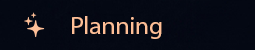
<style>
.page{position:relative;width:255px;height:50px;background:#040813}
.page>*{position:absolute;margin:0}
.t1{font:25px "MyriadPro-Regular";color:#febf97}
</style>
<div class="page">
<p class="t1" style="left:72px;top:16px;width:90px;height:23px">Planning</p>
</div>
